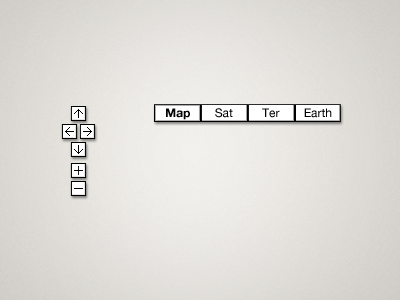
<style>
.page{position:relative;width:400px;height:300px}
.page>*{position:absolute;margin:0}
.t1{font:12px "HelveticaNeue-Bold";color:#000000}
.t2{font:12px "HelveticaNeue";color:#000000}
</style>
<div class="page">
<p class="t1" style="left:166px;top:108px;width:24px;height:12px">Map</p>
<p class="t2" style="left:215px;top:108px;width:18px;height:10px">Sat</p>
<p class="t2" style="left:262px;top:108px;width:18px;height:10px">Ter</p>
<p class="t2" style="left:304px;top:108px;width:28px;height:10px">Earth</p>
</div>
